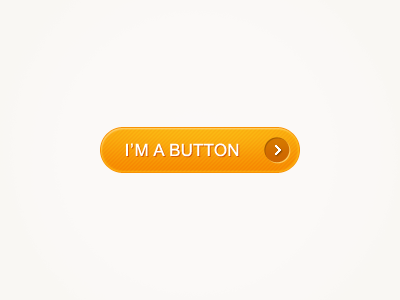
<style>
.page{position:relative;width:400px;height:300px;background:#fbf9f7}
.page>*{position:absolute;margin:0}
.t1{font:17px "ArialMT";letter-spacing:0.025em;color:#ffffff;text-transform:uppercase}
</style>
<div class="page">
<p class="t1" style="left:126px;top:143px;width:113px;height:14px">I’m a button</p>
</div>
